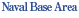
<style>
.page{position:relative;width:79px;height:18px;background:#ffffff}
.page>*{position:absolute;margin:0}
.t1{font:12px "RyuminPro-ExBold";letter-spacing:-0.08em;color:#2f4e96;scale:0.9 1}
</style>
<div class="page">
<p class="t1" style="left:1px;top:2px;width:77px;height:10px">Naval Base Area</p>
</div>
